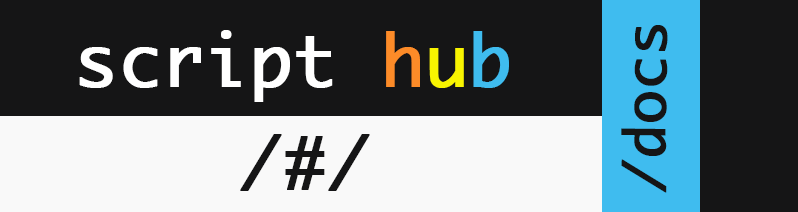
<style>
.page{position:relative;width:798px;height:212px;background:#151516}
.page>*{position:absolute;margin:0}
.t1{font:70px "Monaco";color:#ffffff;font-weight:bold}
.t2{font:70px "Monaco";color:#fc8b28;font-weight:bold}
.t3{font:70px "Monaco";color:#f8f400;font-weight:bold}
.t4{font:70px "Monaco";color:#3fbcef;font-weight:bold}
.t5{font:55px "Monaco";color:#151516;font-weight:bold}
.t6{font:70px "Monaco";color:#151516;font-weight:bold}
</style>
<div class="page">
<p class="t1" style="left:79px;top:30px;width:430px;height:72px">script <span class="t2">h</span><span class="t3">u</span><span class="t4">b</span></p>
<p class="t5" style="left:621px;top:25px;width:47px;height:168px;rotate:-89deg">/docs</p>
<p class="t6" style="left:240px;top:134px;width:130px;height:57px">/#/</p>
</div>
